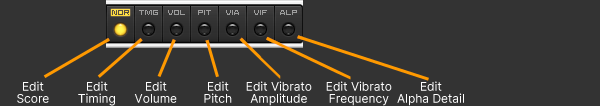
<style>
.page{position:relative;width:600px;height:106px;background:#333333}
.page>*{position:absolute;margin:0}
.t1{font:12px/12px "Sarasa-Gothic-SC-Regular";color:#ffffff}
</style>
<div class="page">
<p class="t1" style="left:17px;top:81px;width:32px;height:22px;text-align:center">Edit<br>Score</p>
<p class="t1" style="left:78px;top:81px;width:37px;height:25px;text-align:center">Edit<br>Timing</p>
<p class="t1" style="left:134px;top:81px;width:43px;height:22px;text-align:center">Edit<br>Volume</p>
<p class="t1" style="left:204px;top:81px;width:28px;height:22px;text-align:center">Edit<br>Pitch</p>
<p class="t1" style="left:246px;top:81px;width:66px;height:25px;text-align:center">Edit Vibrato<br>Amplitude</p>
<p class="t1" style="left:326px;top:81px;width:66px;height:25px;text-align:center">Edit Vibrato<br>Frequency</p>
<p class="t1" style="left:397px;top:81px;width:67px;height:25px;text-align:center">Edit<br>Alpha Detail</p>
</div>
